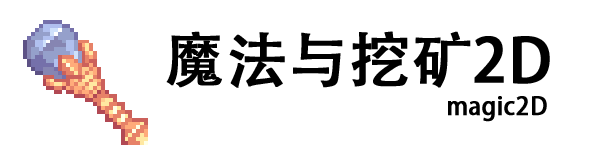
<style>
.page{position:relative;width:600px;height:164px;background:#ffffff}
.page>*{position:absolute;margin:0}
.t1{font:60px "AdobeHeitiStd-Regular";color:#000000;font-weight:bold}
.t2{font:24px "AdobeHeitiStd-Regular";color:#000000;font-weight:bold}
</style>
<div class="page">
<p class="t1" style="left:166px;top:31px;width:384px;height:57px">魔法与挖矿2D</p>
<p class="t2" style="left:448px;top:96px;width:99px;height:26px">magic2D</p>
</div>
